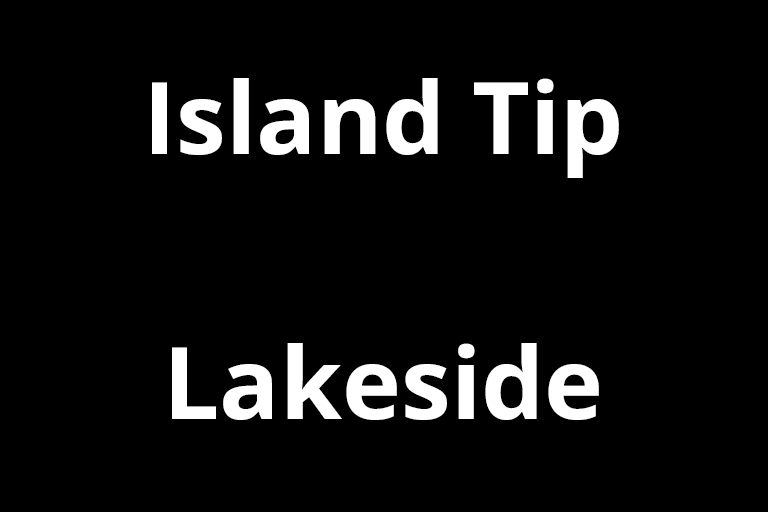
<style>
.page{position:relative;width:768px;height:512px;background:#000000}
.page>*{position:absolute;margin:0}
.t1{font:100px "OpenSansRoman-Bold";color:#ffffff}
</style>
<div class="page">
<p class="t1" style="left:152px;top:78px;width:467px;height:100px">Island Tip</p>
<p class="t1" style="left:172px;top:343px;width:427px;height:77px">Lakeside</p>
</div>
